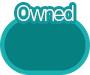
<style>
.page{position:relative;width:90px;height:75px;background:#078081}
.page>*{position:absolute;margin:0}
.t1{font:20px "GothicMB101Pro-Light";letter-spacing:-0.08em;color:#fff6f3;scale:0.9 1}
</style>
<div class="page">
<p class="t1" style="left:17px;top:5px;width:57px;height:16px">Owned</p>
</div>
